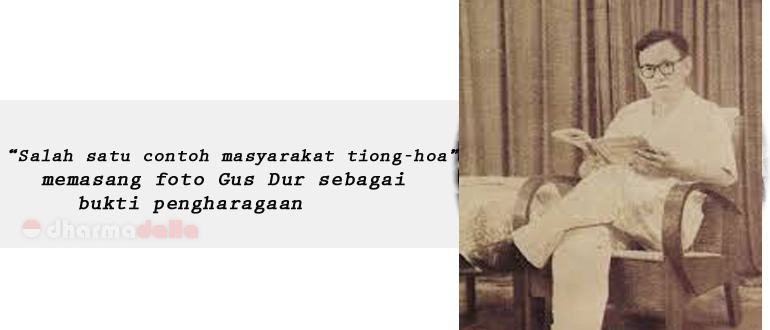
<style>
.page{position:relative;width:770px;height:330px;background:#ffffff}
.page>*{position:absolute;margin:0}
.t1{font:20px/24px "PrestigeEliteStd-Bd";color:#0a080b;font-weight:bold;font-style:italic}
.t2{font:18px/24px "PrestigeEliteStd-Bd";color:#0a080b;font-weight:bold;font-style:italic}
</style>
<div class="page">
<p class="t1" style="left:9px;top:149px;width:451px;height:65px">“<span class="t2">Salah satu contoh masyarakat tiong-hoa</span>”<br> memasang foto Gus Dur sebagai     bukti pengharagaan</p>
</div>
